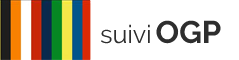
<style>
.page{position:relative;width:239px;height:60px;background:#ffffff}
.page>*{position:absolute;margin:0}
.t1{font:25px "Raleway-Regular";color:#2e2e2e}
.t2{font:31.2px "Raleway-Bold";color:#2e2e2e}
</style>
<div class="page">
<p class="t1" style="left:101px;top:24px;width:49px;height:20px">suivi</p>
<p class="t2" style="left:156px;top:20px;width:65px;height:24px">OGP</p>
</div>
